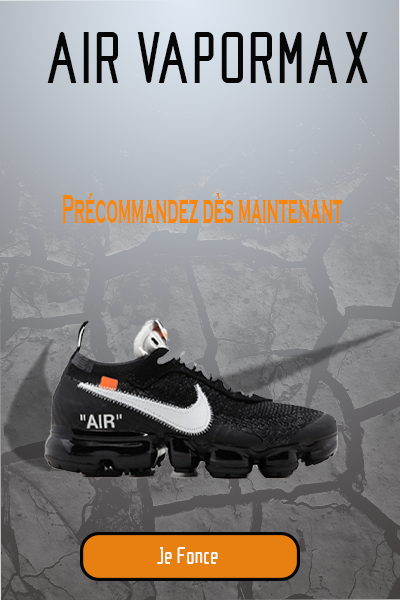
<style>
.page{position:relative;width:400px;height:600px}
.page>*{position:absolute;margin:0}
.t1{font:49.7px "Nike200204";color:#060606}
.t2{font:40.1px "CopperplateGothic-Bold";color:#f8860a;scale:0.4 1}
.t3{font:15.7px "Nike200204";color:#f9f8f8}
</style>
<div class="page">
<p class="t1" style="left:47px;top:32px;width:321px;height:51px">AIR VAPORMAX</p>
<p class="t2" style="left:62px;top:193px;width:281px;height:31px">Précommandez dès maintenant</p>
<p class="t3" style="left:157px;top:547px;width:61px;height:17px">Je Fonce</p>
</div>
